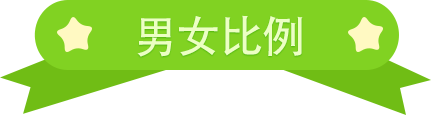
<style>
.page{position:relative;width:431px;height:115px;background:#81d222}
.page>*{position:absolute;margin:0}
.t1{font:44.3px "AdobeHeitiStd-Regular";letter-spacing:-0.025em;color:#ecffc3}
</style>
<div class="page">
<p class="t1" style="left:137px;top:15px;width:166px;height:42px">男女比例</p>
</div>
